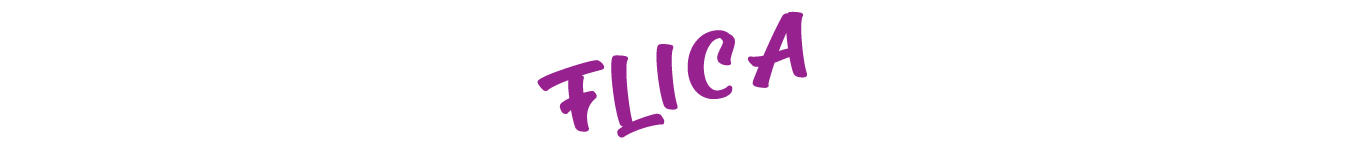
<style>
.page{position:relative;width:1350px;height:150px;background:#ffffff}
.page>*{position:absolute;margin:0}
.t1{font:100px "SignatraDEMO";letter-spacing:-0.05em;color:#97218f;font-weight:bold;scale:1.17 1}
</style>
<div class="page">
<p class="t1" style="left:537px;top:11px;width:270px;height:127px;rotate:-14deg">F L I C A</p>
</div>
